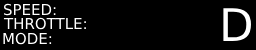
<style>
.page{position:relative;width:256px;height:50px;background:#000000}
.page>*{position:absolute;margin:0}
.t1{font:15px "DejaVuSans";color:#ffffff}
.t2{font:45px "DejaVuSans";color:#ffffff}
</style>
<div class="page">
<p class="t1" style="left:3px;top:3px;width:53px;height:13px">SPEED:</p>
<p class="t1" style="left:3px;top:17px;width:83px;height:13px">THROTTLE:</p>
<p class="t2" style="left:223px;top:8px;width:28px;height:33px">D</p>
<p class="t1" style="left:3px;top:32px;width:49px;height:13px">MODE:</p>
</div>
